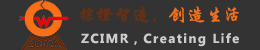
<style>
.page{position:relative;width:260px;height:50px;background:#333333}
.page>*{position:absolute;margin:0}
.t1{font:18.3px "STXingkai";color:#663014}
.t2{font:18.3px "STXingkai";color:#f76f17}
.t3{font:12.2px "MicrosoftYaHei-Bold";letter-spacing:0.12em;color:#cccccc}
</style>
<div class="page">
<p class="t1" style="left:79px;top:6px;width:160px;height:17px">棕橙智造，<span class="t2">创造生活</span></p>
<p class="t3" style="left:81px;top:33px;width:158px;height:14px">ZCIMR，Creating Life</p>
</div>
